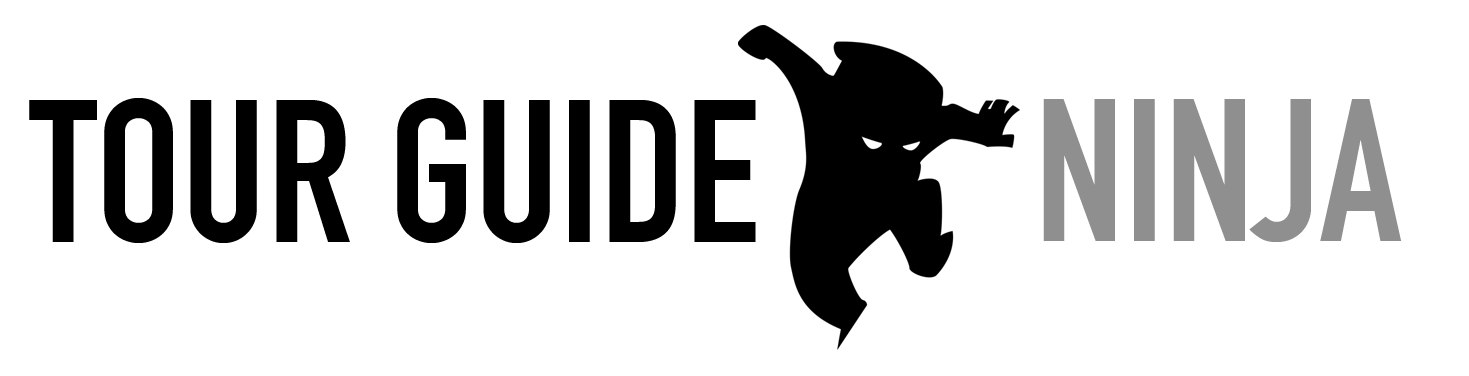
<style>
.page{position:relative;width:1469px;height:376px;background:#ffffff}
.page>*{position:absolute;margin:0}
.t1{font:200px "DINCondensed-Bold";color:#000000}
.t2{font:200px "DINCondensed-Bold";color:#8f8f8f}
</style>
<div class="page">
<p class="t1" style="left:29px;top:98px;width:727px;height:145px">TOUR GUIDE</p>
<p class="t2" style="left:1043px;top:99px;width:359px;height:143px">NINJA</p>
</div>
